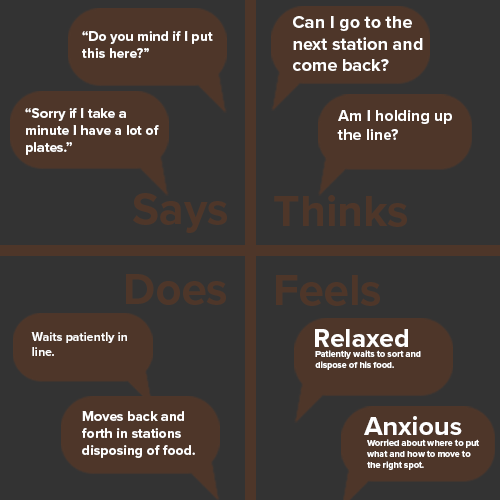
<style>
.page{position:relative;width:500px;height:500px;background:#333333}
.page>*{position:absolute;margin:0}
.t1{font:18px "ProximaNova-Bold";color:#ffffff}
.t2{font:14px "ProximaNova-Bold";color:#ffffff}
.t3{font:16px "ProximaNova-Bold";color:#ffffff}
.t4{font:45px "ProximaNova-Bold";color:#4e3629}
.t5{font:27px "ProximaNova-Bold";color:#ffffff}
.t6{font:12.3px "ProximaNova-Bold";color:#ffffff}
.t7{font:9px "ProximaNova-Bold";color:#ffffff}
</style>
<div class="page">
<p class="t1" style="left:293px;top:16px;width:130px;height:55px">Can I go to the next station and come back?</p>
<p class="t2" style="left:82px;top:31px;width:131px;height:27px">“Do you mind if I put this here?”</p>
<p class="t2" style="left:25px;top:108px;width:134px;height:47px">“Sorry if I take a minute I have a lot of plates.”</p>
<p class="t3" style="left:337px;top:110px;width:115px;height:30px">Am I holding up the line?</p>
<p class="t4" style="left:133px;top:193px;width:94px;height:40px">Says</p>
<p class="t4" style="left:274px;top:195px;width:133px;height:32px">Thinks</p>
<p class="t4" style="left:126px;top:274px;width:100px;height:31px">Does</p>
<p class="t4" style="left:276px;top:275px;width:104px;height:31px">Feels</p>
<p class="t5" style="left:315px;top:329px;width:93px;height:18px">Relaxed</p>
<p class="t6" style="left:31px;top:332px;width:96px;height:24px">Waits patiently in line.</p>
<p class="t7" style="left:315px;top:350px;width:106px;height:20px">Patiently waits to sort and dispose of his food.</p>
<p class="t2" style="left:82px;top:411px;width:113px;height:47px">Moves back and forth in stations disposing of food.</p>
<p class="t5" style="left:364px;top:416px;width:98px;height:19px">Anxious</p>
<p class="t7" style="left:367px;top:439px;width:112px;height:31px">Worried about where to put what and how to move to the right spot.</p>
</div>
